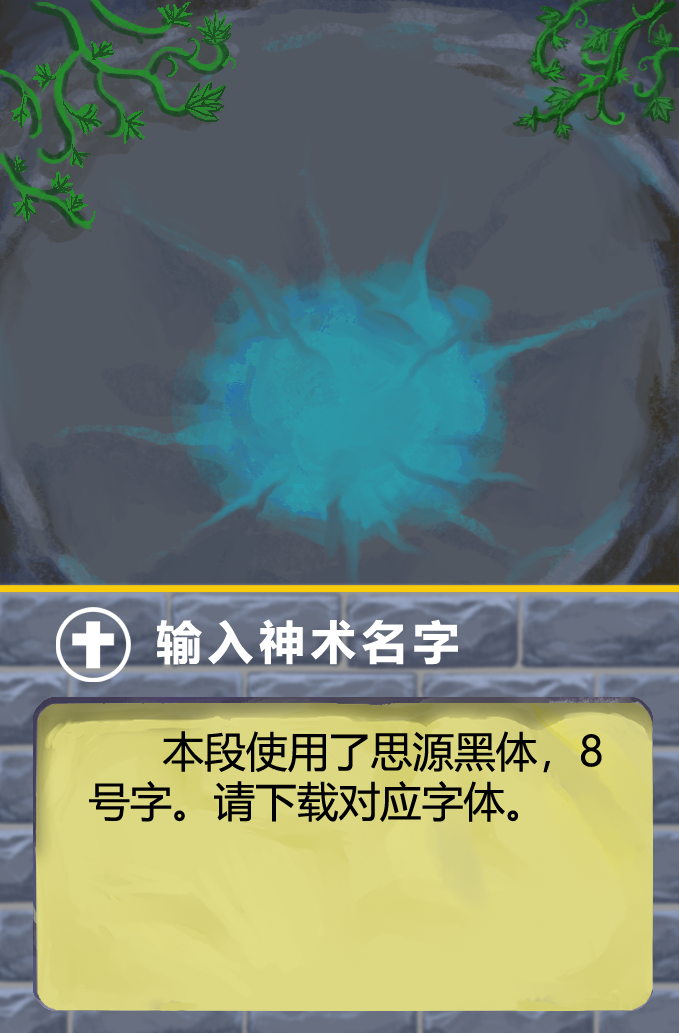
<style>
.page{position:relative;width:679px;height:1033px}
.page>*{position:absolute;margin:0}
.t1{font:45.8px "MicrosoftYaHei-Bold";letter-spacing:0.12em;color:#ffffff}
.t2{font:41.7px/50px "MicrosoftYaHei";color:#000000}
</style>
<div class="page">
<p class="t1" style="left:157px;top:619px;width:301px;height:46px">输入神术名字</p>
<p class="t2" style="left:89px;top:731px;width:513px;height:91px">本段使用了思源黑体，8<br>号字。请下载对应字体。</p>
</div>
